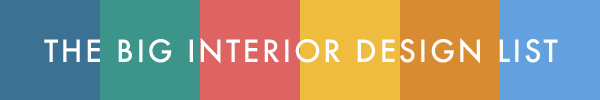
<style>
.page{position:relative;width:600px;height:100px}
.page>*{position:absolute;margin:0}
.t1{font:30px "Futura-Medium";letter-spacing:0.08em;color:#ffffff}
</style>
<div class="page">
<p class="t1" style="left:44px;top:37px;width:514px;height:27px">THE BIG INTERIOR DESIGN LIST</p>
</div>
